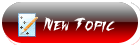
<style>
.page{position:relative;width:140px;height:45px}
.page>*{position:absolute;margin:0}
.t1{font:15px "FightingSpiritTBS";color:#ffffff}
</style>
<div class="page">
<p class="t1" style="left:43px;top:17px;width:72px;height:16px">New Topic</p>
</div>
